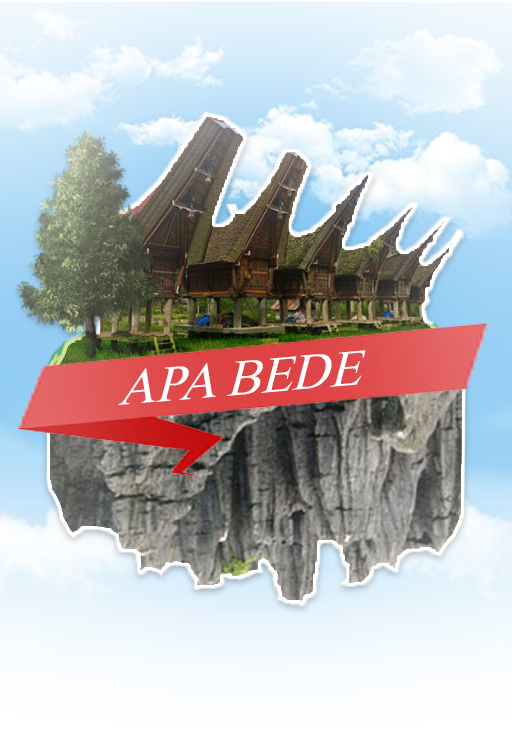
<style>
.page{position:relative;width:512px;height:751px}
.page>*{position:absolute;margin:0}
.t1{font:53.5px "TimesNewRomanPSMT";color:#ffffff;scale:0.96 1}
</style>
<div class="page">
<p class="t1" style="left:118px;top:350px;width:248px;height:55px;rotate:-5deg">APA BEDE</p>
</div>
